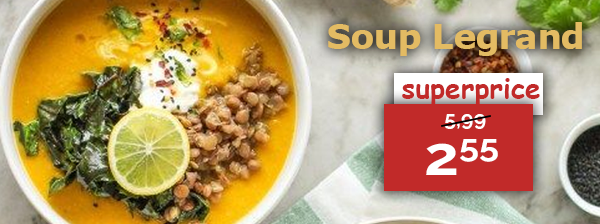
<style>
.page{position:relative;width:600px;height:224px}
.page>*{position:absolute;margin:0}
.t1{font:35px "Tahoma-Bold";color:#e3bb63;scale:1.06 1}
.t2{font:27.9px "ComicSansMS-Bold";color:#c12a29}
.t3{font:21.4px "Raleway-Bold";color:#ffffff}
.t4{font:54.1px "Raleway-Bold";color:#ffffff;scale:1.14 1}
</style>
<div class="page">
<p class="t1" style="left:328px;top:22px;width:254px;height:34px">Soup Legrand</p>
<p class="t2" style="left:402px;top:78px;width:138px;height:28px">superprice</p>
<p class="t3" style="left:444px;top:114px;width:42px;height:15px">5,99</p>
<p class="t4" style="left:426px;top:139px;width:72px;height:36px">255</p>
</div>
